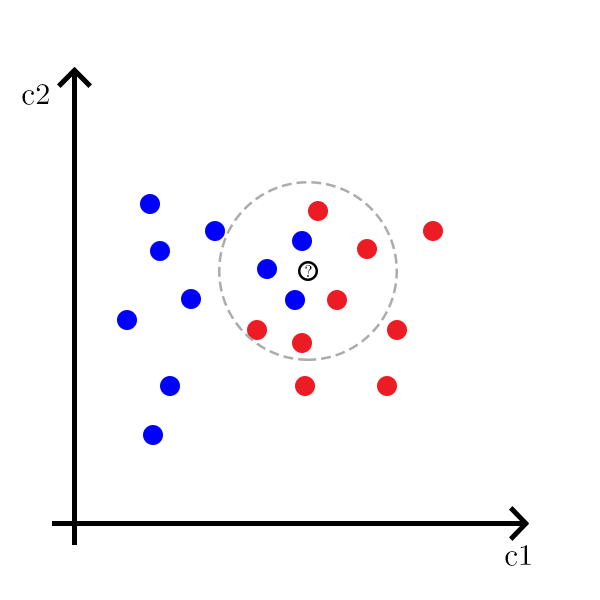
<style>
.page{position:relative;width:600px;height:600px;background:#ffffff}
.page>*{position:absolute;margin:0}
.t1{font:30px "CMUSerif-Roman";color:#000000}
.t2{font:16px "CMUSerif-Roman";color:#000000}
</style>
<div class="page">
<p class="t1" style="left:22px;top:84px;width:27px;height:21px">c2</p>
<p class="t2" style="left:305px;top:265px;width:7px;height:12px">?</p>
<p class="t1" style="left:505px;top:545px;width:26px;height:21px">c1</p>
</div>
